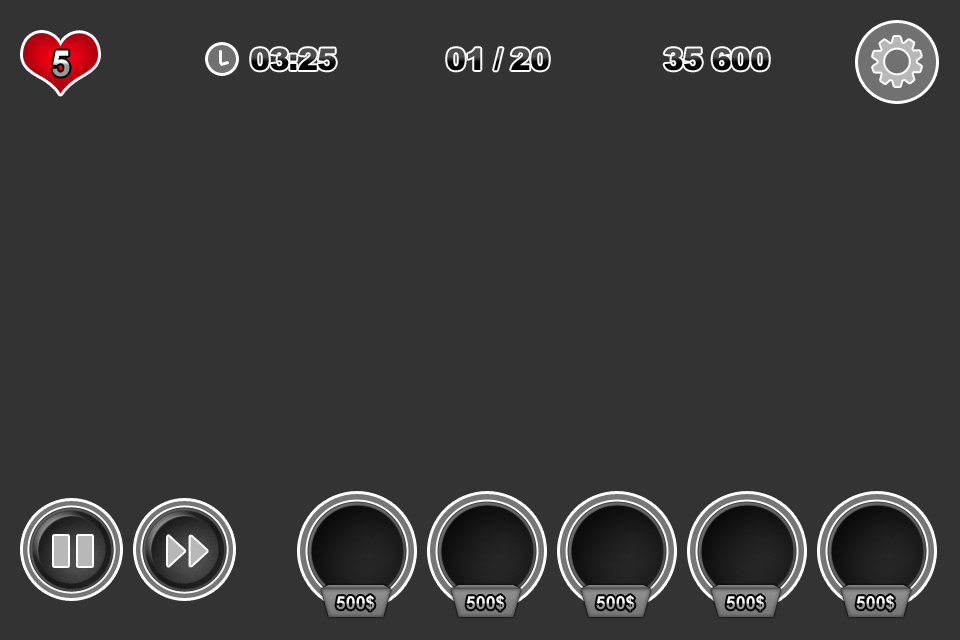
<style>
.page{position:relative;width:960px;height:640px;background:#333333}
.page>*{position:absolute;margin:0}
.t1{font:36px "Arial-BoldMT";letter-spacing:-0.05em}
.t2{font:30px "Arial-Black";letter-spacing:-0.025em}
.t3{font:18px "Arial-BoldMT"}
</style>
<div class="page">
<p class="t1" style="left:52px;top:50px;width:18px;height:27px">5</p>
<p class="t2" style="left:251px;top:48px;width:85px;height:23px">03:25</p>
<p class="t2" style="left:447px;top:48px;width:102px;height:23px">01 / 20</p>
<p class="t2" style="left:664px;top:48px;width:105px;height:23px">35 600</p>
<p class="t3" style="left:336px;top:595px;width:39px;height:16px">500$</p>
<p class="t3" style="left:466px;top:595px;width:39px;height:16px">500$</p>
<p class="t3" style="left:596px;top:595px;width:39px;height:16px">500$</p>
<p class="t3" style="left:726px;top:595px;width:39px;height:16px">500$</p>
<p class="t3" style="left:856px;top:595px;width:39px;height:16px">500$</p>
</div>
